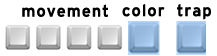
<style>
.page{position:relative;width:217px;height:56px;background:#ffffff}
.page>*{position:absolute;margin:0}
.t1{font:16px "Interstate-Regular";letter-spacing:0.05em;color:#000000;font-weight:bold}
</style>
<div class="page">
<p class="t1" style="left:22px;top:4px;width:86px;height:13px">movement</p>
<p class="t1" style="left:122px;top:4px;width:89px;height:16px">color  trap</p>
</div>
